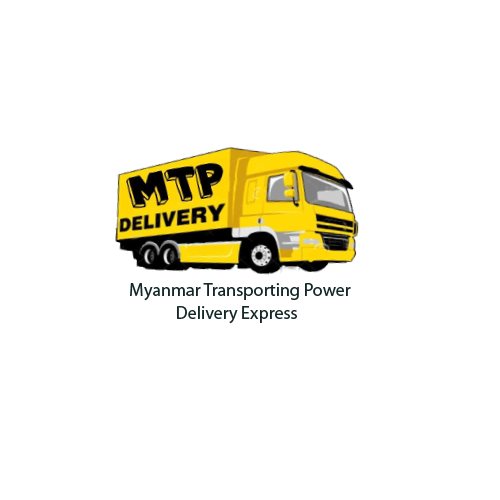
<style>
.page{position:relative;width:500px;height:500px;background:#ffffff}
.page>*{position:absolute;margin:0}
.t1{font:18px "MyriadPro-Regular";color:#132827}
</style>
<div class="page">
<p class="t1" style="left:130px;top:283px;width:221px;height:18px">Myanmar Transporting Power</p>
<p class="t1" style="left:177px;top:306px;width:120px;height:18px">Delivery Express</p>
</div>
